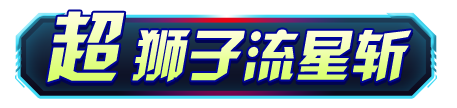
<style>
.page{position:relative;width:457px;height:108px;background:#ffffff}
.page>*{position:absolute;margin:0}
.t1{font:76px "HYk2gj";font-style:italic}
.t2{font:55px "HYk2gj";font-style:italic}
</style>
<div class="page">
<p class="t1" style="left:47px;top:11px;width:78px;height:71px">超</p>
<p class="t2" style="left:132px;top:29px;width:280px;height:53px">狮子流星斩</p>
</div>
